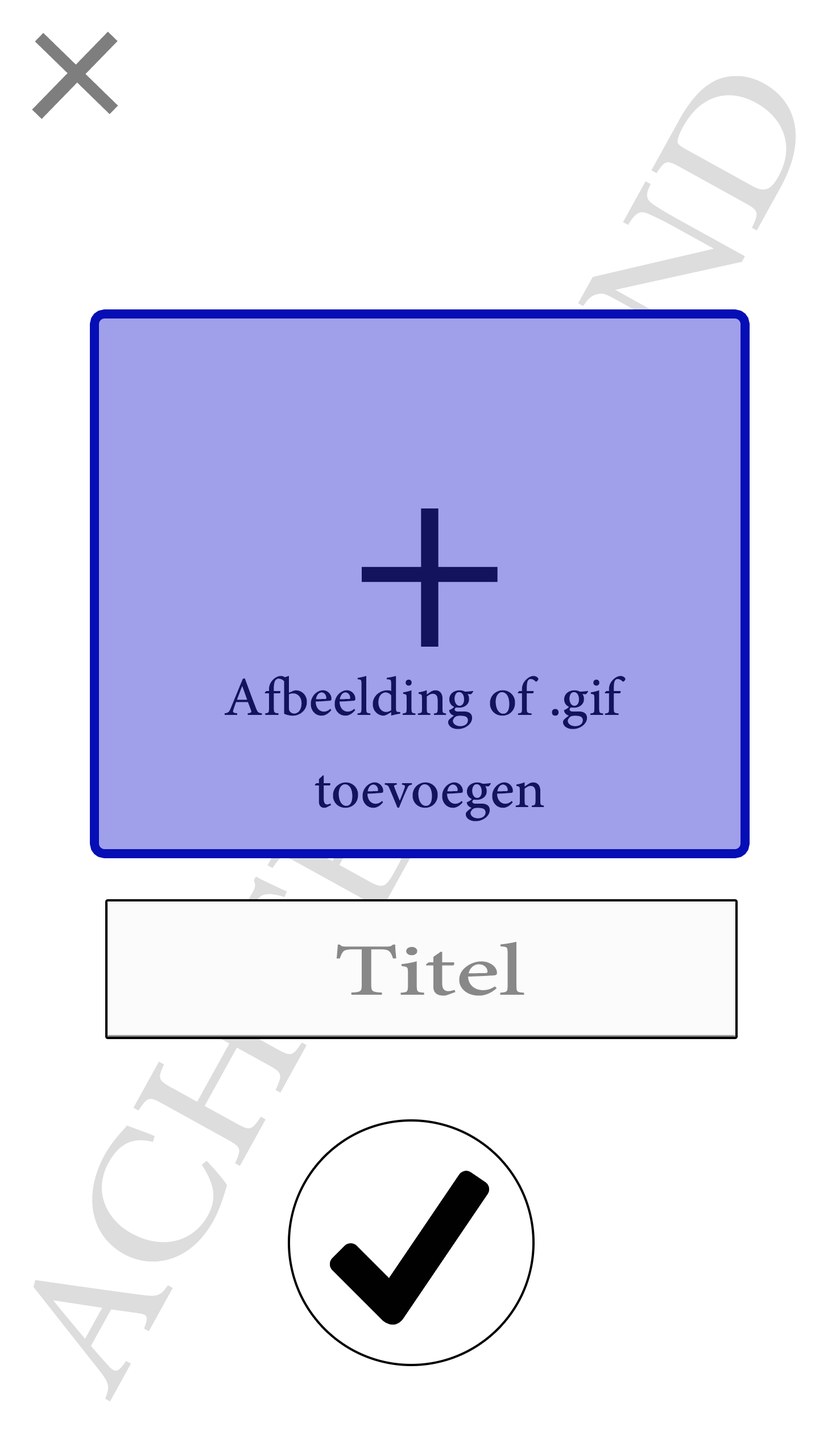
<style>
.page{position:relative;width:819px;height:1456px;background:#ffffff}
.page>*{position:absolute;margin:0}
.t1{font:313.6px "AdobeArabic-Regular";color:#7e7e7e}
.t2{font:399.1px "AdobeArabic-Regular";color:#12125d}
.t3{font:76.8px "AdobeArabic-Regular";color:#12125d}
.t4{font:104px "AdobeArabic-Regular";color:#888888;scale:1.35 1}
</style>
<div class="page">
<p class="t1" style="left:32px;top:31px;width:86px;height:88px;rotate:44deg">+</p>
<p class="t2" style="left:362px;top:508px;width:136px;height:139px">+</p>
<p class="t3" style="left:225px;top:676px;width:401px;height:145px;text-align:center">Afbeelding of .gif <br>toevoegen</p>
<p class="t4" style="left:336px;top:942px;width:188px;height:54px">Titel</p>
</div>
